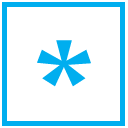
<style>
.page{position:relative;width:128px;height:128px;background:#ffffff}
.page>*{position:absolute;margin:0}
.t1{font:115.7px "CalisMTBol";color:#00aeef;scale:1.12 1}
</style>
<div class="page">
<p class="t1" style="left:37px;top:40px;width:54px;height:47px">*</p>
</div>
